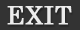
<style>
.page{position:relative;width:80px;height:30px;background:#333333}
.page>*{position:absolute;margin:0}
.t1{font:25px "Century";letter-spacing:0.01em;color:#ececec;font-weight:bold}
</style>
<div class="page">
<p class="t1" style="left:7px;top:6px;width:65px;height:19px">EXIT</p>
</div>
